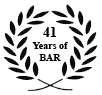
<style>
.page{position:relative;width:102px;height:95px;background:#ffffff}
.page>*{position:absolute;margin:0}
.t1{font:10px "TimesNewRomanPS-BoldMT";color:#000000}
.t2{font:14px "TimesNewRomanPS-BoldMT";color:#000000}
</style>
<div class="page">
<p class="t1" style="left:32px;top:27px;width:36px;height:34px;text-align:center"><span class="t2">41<br></span>Years of<br>BAR</p>
</div>
